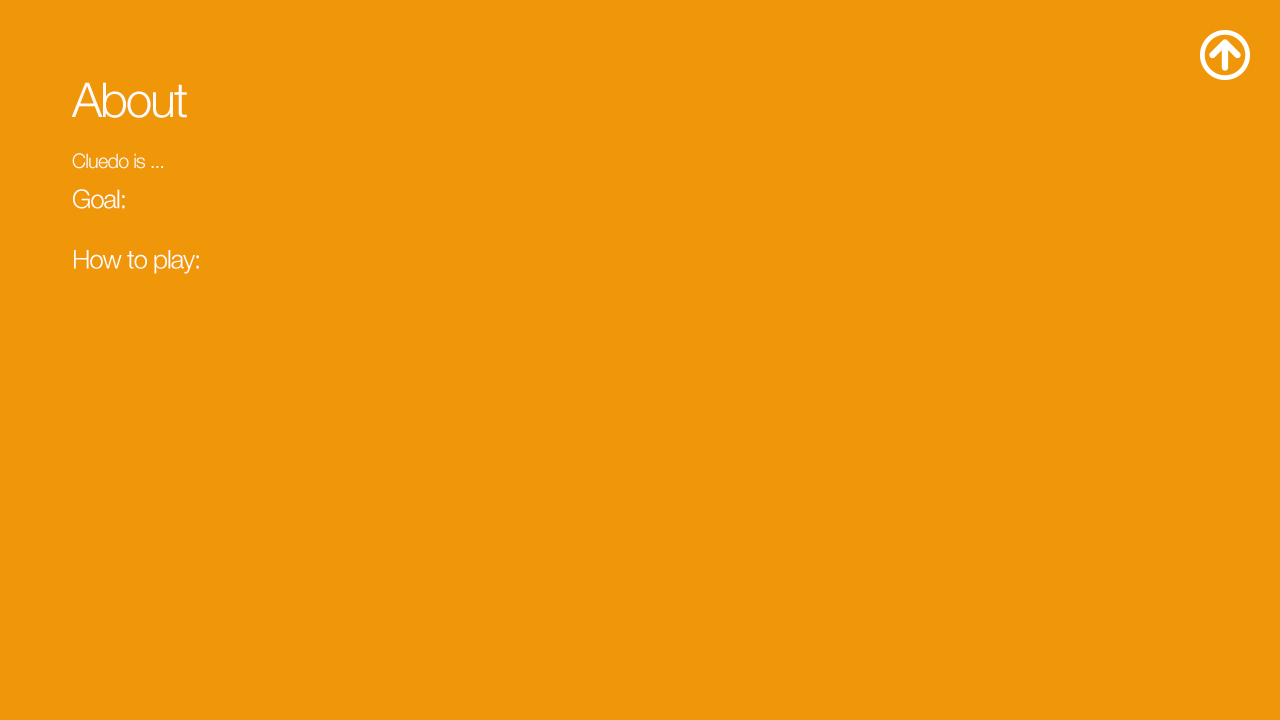
<style>
.page{position:relative;width:1280px;height:720px;background:#f09609}
.page>*{position:absolute;margin:0}
.t1{font:48px "HelveticaNeue-Light";letter-spacing:-0.04em;color:#fffbfb}
.t2{font:26px/20.1px "HelveticaNeue-Light";letter-spacing:-0.04em;color:#fffbfb}
.t3{font:20px/20.1px "HelveticaNeue-Light";letter-spacing:-0.04em;color:#fffbfb}
</style>
<div class="page">
<p class="t1" style="left:71px;top:82px;width:116px;height:36px">About</p>
<p class="t2" style="left:72px;top:153px;width:127px;height:121px"><span class="t3">Cluedo is ...<br><br></span>Goal:<br><br><br>How to play:</p>
</div>
